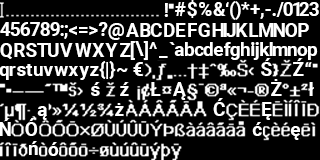
<style>
.page{position:relative;width:320px;height:160px;background:#000000}
.page>*{position:absolute;margin:0}
.t1{font:19px "Roboto-Bold";color:#ffffff}
</style>
<div class="page">
<p class="t1" style="left:164px;top:3px;width:4px;height:14px">!</p>
<p class="t1" style="left:175px;top:2px;width:11px;height:14px">#</p>
<p class="t1" style="left:187px;top:0px;width:10px;height:18px">$</p>
<p class="t1" style="left:199px;top:2px;width:13px;height:14px">%</p>
<p class="t1" style="left:213px;top:2px;width:13px;height:14px">&amp;</p>
<p class="t1" style="left:226px;top:2px;width:3px;height:5px">‘</p>
<p class="t1" style="left:230px;top:1px;width:6px;height:19px">(</p>
<p class="t1" style="left:235px;top:1px;width:6px;height:19px">)</p>
<p class="t1" style="left:241px;top:2px;width:9px;height:8px">*</p>
<p class="t1" style="left:250px;top:4px;width:10px;height:10px">+</p>
<p class="t1" style="left:276px;top:2px;width:8px;height:15px">/</p>
<p class="t1" style="left:283px;top:2px;width:10px;height:14px">0</p>
<p class="t1" style="left:293px;top:2px;width:7px;height:14px">1</p>
<p class="t1" style="left:299px;top:2px;width:10px;height:14px">2</p>
<p class="t1" style="left:309px;top:2px;width:10px;height:14px">3</p>
<p class="t1" style="left:260px;top:13px;width:4px;height:6px">,</p>
<p class="t1" style="left:265px;top:9px;width:6px;height:2px">-</p>
<p class="t1" style="left:272px;top:13px;width:4px;height:3px">.</p>
<p class="t1" style="left:0px;top:22px;width:11px;height:14px">4</p>
<p class="t1" style="left:10px;top:22px;width:10px;height:14px">5</p>
<p class="t1" style="left:20px;top:22px;width:10px;height:14px">6</p>
<p class="t1" style="left:30px;top:22px;width:10px;height:14px">7</p>
<p class="t1" style="left:40px;top:22px;width:10px;height:14px">8</p>
<p class="t1" style="left:50px;top:22px;width:10px;height:14px">9</p>
<p class="t1" style="left:60px;top:25px;width:4px;height:11px">:</p>
<p class="t1" style="left:64px;top:25px;width:4px;height:14px">;</p>
<p class="t1" style="left:69px;top:26px;width:8px;height:9px">&lt;</p>
<p class="t1" style="left:79px;top:27px;width:9px;height:6px">=</p>
<p class="t1" style="left:89px;top:26px;width:9px;height:9px">&gt;</p>
<p class="t1" style="left:98px;top:22px;width:10px;height:14px">?</p>
<p class="t1" style="left:108px;top:23px;width:16px;height:17px">@</p>
<p class="t1" style="left:126px;top:23px;width:13px;height:14px">A</p>
<p class="t1" style="left:140px;top:23px;width:11px;height:14px">B</p>
<p class="t1" style="left:150px;top:23px;width:12px;height:14px">C</p>
<p class="t1" style="left:164px;top:23px;width:11px;height:14px">D</p>
<p class="t1" style="left:176px;top:23px;width:10px;height:14px">E</p>
<p class="t1" style="left:188px;top:23px;width:9px;height:14px">F</p>
<p class="t1" style="left:198px;top:23px;width:12px;height:14px">G</p>
<p class="t1" style="left:212px;top:23px;width:12px;height:14px">H</p>
<p class="t1" style="left:223px;top:23px;width:4px;height:14px">I</p>
<p class="t1" style="left:226px;top:23px;width:10px;height:14px">J</p>
<p class="t1" style="left:236px;top:23px;width:12px;height:14px">K</p>
<p class="t1" style="left:249px;top:23px;width:10px;height:14px">L</p>
<p class="t1" style="left:259px;top:23px;width:15px;height:14px">M</p>
<p class="t1" style="left:273px;top:23px;width:12px;height:14px">N</p>
<p class="t1" style="left:285px;top:23px;width:12px;height:14px">O</p>
<p class="t1" style="left:298px;top:23px;width:11px;height:14px">P</p>
<p class="t1" style="left:130px;top:41px;width:5px;height:19px">[</p>
<p class="t1" style="left:135px;top:41px;width:9px;height:15px">\</p>
<p class="t1" style="left:143px;top:41px;width:5px;height:19px">]</p>
<p class="t1" style="left:0px;top:43px;width:12px;height:16px">Q</p>
<p class="t1" style="left:14px;top:43px;width:11px;height:14px">R</p>
<p class="t1" style="left:26px;top:43px;width:11px;height:14px">S</p>
<p class="t1" style="left:37px;top:43px;width:12px;height:14px">T</p>
<p class="t1" style="left:48px;top:43px;width:11px;height:14px">U</p>
<p class="t1" style="left:60px;top:43px;width:13px;height:14px">V</p>
<p class="t1" style="left:75px;top:43px;width:17px;height:14px">W</p>
<p class="t1" style="left:92px;top:43px;width:13px;height:14px">X</p>
<p class="t1" style="left:105px;top:43px;width:13px;height:14px">Y</p>
<p class="t1" style="left:120px;top:43px;width:11px;height:14px">Z</p>
<p class="t1" style="left:149px;top:42px;width:8px;height:7px">^</p>
<p class="t1" style="left:169px;top:42px;width:6px;height:3px">`</p>
<p class="t1" style="left:174px;top:46px;width:10px;height:10px">a</p>
<p class="t1" style="left:185px;top:42px;width:10px;height:14px">b</p>
<p class="t1" style="left:194px;top:46px;width:10px;height:10px">c</p>
<p class="t1" style="left:203px;top:42px;width:10px;height:14px">d</p>
<p class="t1" style="left:213px;top:46px;width:10px;height:10px">e</p>
<p class="t1" style="left:224px;top:42px;width:7px;height:14px">f</p>
<p class="t1" style="left:230px;top:46px;width:10px;height:14px">g</p>
<p class="t1" style="left:241px;top:42px;width:9px;height:14px">h</p>
<p class="t1" style="left:251px;top:42px;width:4px;height:14px">i</p>
<p class="t1" style="left:253px;top:42px;width:6px;height:18px">j</p>
<p class="t1" style="left:260px;top:42px;width:10px;height:14px">k</p>
<p class="t1" style="left:269px;top:42px;width:4px;height:14px">l</p>
<p class="t1" style="left:273px;top:46px;width:15px;height:10px">m</p>
<p class="t1" style="left:288px;top:46px;width:9px;height:10px">n</p>
<p class="t1" style="left:297px;top:46px;width:11px;height:10px">o</p>
<p class="t1" style="left:308px;top:46px;width:10px;height:14px">p</p>
<p class="t1" style="left:26px;top:64px;width:7px;height:12px">t</p>
<p class="t1" style="left:99px;top:61px;width:7px;height:18px">{</p>
<p class="t1" style="left:106px;top:62px;width:2px;height:17px">|</p>
<p class="t1" style="left:109px;top:61px;width:7px;height:18px">}</p>
<p class="t1" style="left:133px;top:62px;width:10px;height:14px">€</p>
<p class="t1" style="left:159px;top:56px;width:9px;height:2px">_</p>
<p class="t1" style="left:261px;top:58px;width:11px;height:18px">Ś</p>
<p class="t1" style="left:293px;top:58px;width:11px;height:18px">Ź</p>
<p class="t1" style="left:305px;top:62px;width:7px;height:5px">“</p>
<p class="t1" style="left:0px;top:66px;width:9px;height:14px">q</p>
<p class="t1" style="left:9px;top:66px;width:7px;height:10px">r</p>
<p class="t1" style="left:17px;top:66px;width:9px;height:10px">s</p>
<p class="t1" style="left:34px;top:66px;width:9px;height:10px">u</p>
<p class="t1" style="left:43px;top:66px;width:10px;height:10px">v</p>
<p class="t1" style="left:54px;top:66px;width:14px;height:10px">w</p>
<p class="t1" style="left:68px;top:66px;width:10px;height:10px">x</p>
<p class="t1" style="left:79px;top:66px;width:10px;height:14px">y</p>
<p class="t1" style="left:90px;top:66px;width:9px;height:10px">z</p>
<p class="t1" style="left:117px;top:68px;width:11px;height:4px">~</p>
<p class="t1" style="left:91px;top:82px;width:9px;height:14px">ś</p>
<p class="t1" style="left:120px;top:82px;width:9px;height:14px">ź</p>
<p class="t1" style="left:150px;top:82px;width:11px;height:14px">Ł</p>
<p class="t1" style="left:173px;top:82px;width:13px;height:18px">Ą</p>
<p class="t1" style="left:271px;top:79px;width:11px;height:17px">Ż</p>
<p class="t1" style="left:308px;top:82px;width:6px;height:14px">ł</p>
<p class="t1" style="left:213px;top:98px;width:12px;height:18px">Ć</p>
<p class="t1" style="left:262px;top:102px;width:10px;height:18px">Ę</p>
<p class="t1" style="left:37px;top:106px;width:10px;height:14px">ą</p>
<p class="t1" style="left:115px;top:103px;width:9px;height:13px">ż</p>
<p class="t1" style="left:0px;top:118px;width:11px;height:18px">Ń</p>
<p class="t1" style="left:25px;top:118px;width:13px;height:18px">Ó</p>
<p class="t1" style="left:252px;top:122px;width:10px;height:14px">ć</p>
<p class="t1" style="left:290px;top:126px;width:10px;height:14px">ę</p>
<p class="t1" style="left:29px;top:141px;width:9px;height:14px">ń</p>
<p class="t1" style="left:48px;top:142px;width:11px;height:14px">ó</p>
</div>
